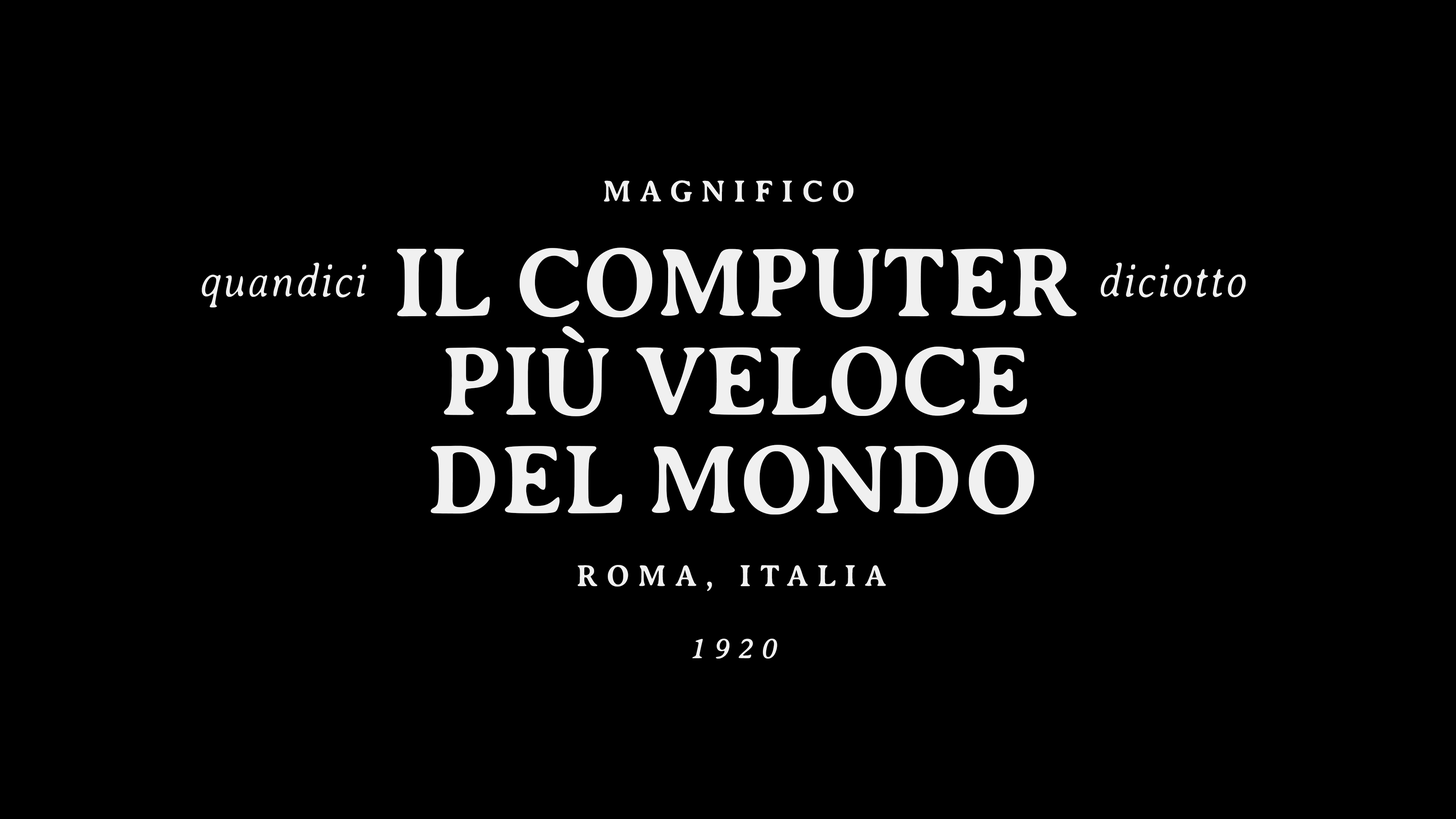
<style>
.page{position:relative;width:1456px;height:819px;background:#000000}
.page>*{position:absolute;margin:0}
.t1{font:31.3px "AveriaSerif-Bold";letter-spacing:0.26em;color:#f0f0f0}
.t2{font:100.4px "AveriaSerif-Bold";letter-spacing:-0.02em;color:#f0f0f0;text-transform:uppercase}
.t3{font:48.9px "AveriaSerif-LightItalic";letter-spacing:0.04em;color:#f0f0f0;scale:0.87 1}
.t4{font:31.2px "AveriaSerif-Bold";letter-spacing:0.26em;color:#f0f0f0}
.t5{font:30.2px "AveriaSerif-Italic";letter-spacing:0.26em;color:#f0f0f0}
</style>
<div class="page">
<p class="t1" style="left:604px;top:180px;width:249px;height:22px">MAGNIFICO</p>
<p class="t2" style="left:397px;top:248px;width:680px;height:69px">Il computer</p>
<p class="t3" style="left:202px;top:262px;width:164px;height:46px">quandici</p>
<p class="t3" style="left:1101px;top:262px;width:145px;height:36px">diciotto</p>
<p class="t2" style="left:444px;top:326px;width:583px;height:90px">più veloce</p>
<p class="t2" style="left:431px;top:445px;width:603px;height:70px">del mondo</p>
<p class="t4" style="left:577px;top:565px;width:309px;height:26px">ROMA, ITALIA</p>
<p class="t5" style="left:692px;top:639px;width:85px;height:20px">1920</p>
</div>
